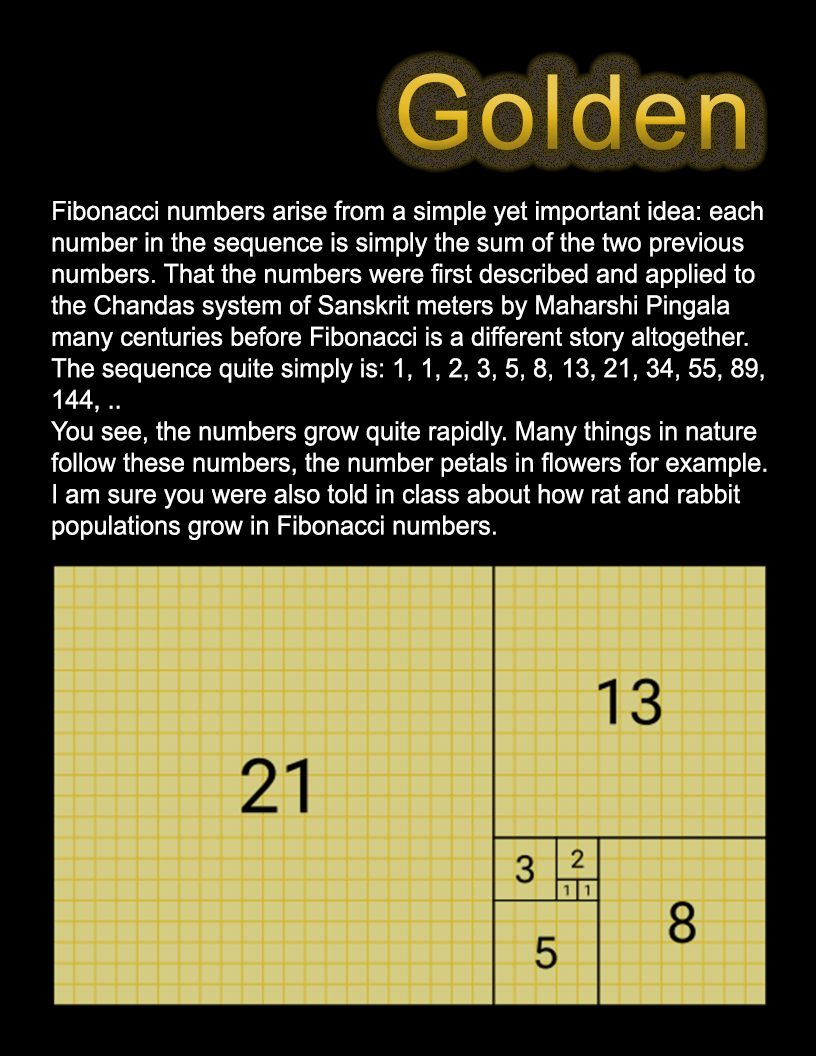
<style>
.page{position:relative;width:816px;height:1056px;background:#000000}
.page>*{position:absolute;margin:0}
.t1{font:103.2px "ArialMT";letter-spacing:0.05em}
.t2{font:26.2px "ArialMT";color:#ffffff;scale:0.97 1}
</style>
<div class="page">
<p class="t1" style="left:398px;top:73px;width:347px;height:77px">Golden</p>
<p class="t2" style="left:51px;top:200px;width:716px;height:340px">Fibonacci numbers arise from a simple yet important idea: each <br>number in the sequence is simply the sum of the two previous <br>numbers. That the numbers were first described and applied to <br>the Chandas system of Sanskrit meters by Maharshi Pingala <br>many centuries before Fibonacci is a different story altogether. <br>The sequence quite simply is: 1, 1, 2, 3, 5, 8, 13, 21, 34, 55, 89, <br>144, .. <br>You see, the numbers grow quite rapidly. Many things in nature <br>follow these numbers, the number petals in flowers for example.<br>I am sure you were also told in class about how rat and rabbit<br>populations grow in Fibonacci numbers.</p>
</div>
